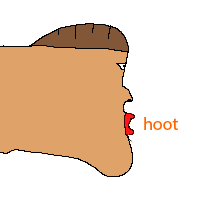
<style>
.page{position:relative;width:200px;height:200px;background:#ffffff}
.page>*{position:absolute;margin:0}
.t1{font:17.6px "MyriadPro-Regular";color:#ff6600}
</style>
<div class="page">
<p class="t1" style="left:144px;top:117px;width:34px;height:13px">hoot</p>
</div>
